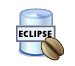
<style>
.page{position:relative;width:75px;height:66px;background:#ffffff}
.page>*{position:absolute;margin:0}
.t1{font:9px "Humanist521BT-XtraBoldCondensed";letter-spacing:0.05em;color:#000000;font-variant:small-caps}
</style>
<div class="page">
<p class="t1" style="left:19px;top:30px;width:33px;height:7px">ECLIPSE</p>
</div>
